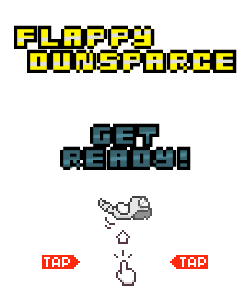
<style>
.page{position:relative;width:250px;height:300px;background:#ffffff}
.page>*{position:absolute;margin:0}
.t1{font:53px "ElfBoyClassic";letter-spacing:-0.06em;color:#000000}
</style>
<div class="page">
<p class="t1" style="left:14px;top:25px;width:141px;height:24px">Flappy</p>
<p class="t1" style="left:27px;top:49px;width:210px;height:24px">Dunsparce</p>
<p class="t1" style="left:90px;top:123px;width:70px;height:24px">GET</p>
<p class="t1" style="left:60px;top:146px;width:131px;height:24px">READY!</p>
</div>
